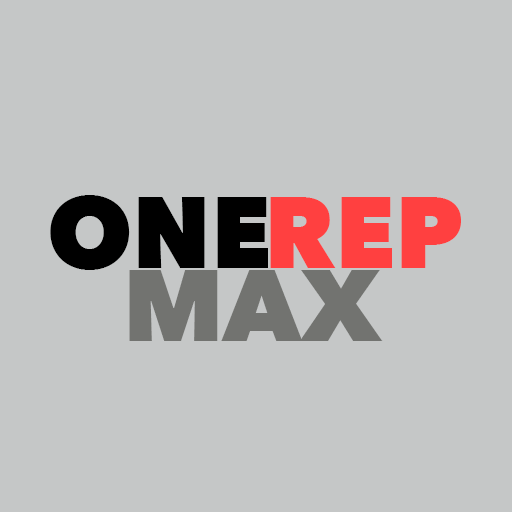
<style>
.page{position:relative;width:512px;height:512px;background:#c5c7c7}
.page>*{position:absolute;margin:0}
.t1{font:100px "AvenirNext-Heavy";color:#000000}
.t2{font:100px "AvenirNext-Heavy";color:#ff4040}
.t3{font:100px "AvenirNext-Heavy";color:#727370}
</style>
<div class="page">
<p class="t1" style="left:50px;top:195px;width:218px;height:75px">ONE</p>
<p class="t2" style="left:270px;top:197px;width:191px;height:71px">REP</p>
<p class="t3" style="left:129px;top:270px;width:254px;height:71px">MAX</p>
</div>
